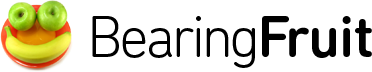
<style>
.page{position:relative;width:372px;height:72px;background:#ffffff}
.page>*{position:absolute;margin:0}
.t1{font:59.8px "DINNextRoundedLTPro-Light";letter-spacing:-0.07em;color:#000000}
.t2{font:59.8px "DINNextRoundedLTPro-Medium";letter-spacing:-0.07em;color:#000000}
</style>
<div class="page">
<p class="t1" style="left:92px;top:16px;width:280px;height:52px">Bearing<span class="t2">Fruit</span></p>
</div>
